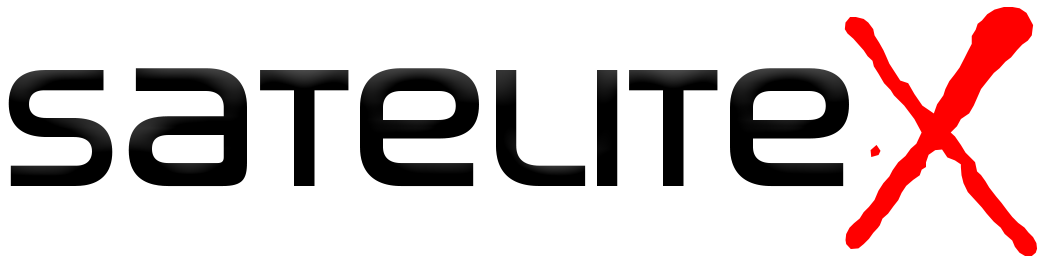
<style>
.page{position:relative;width:1047px;height:261px;background:#ffffff}
.page>*{position:absolute;margin:0}
.t1{font:674.5px "Chiller-Regular";letter-spacing:-0.04em;color:#ff0000}
.t2{font:172.2px "NasalizationRg-Regular";letter-spacing:-0.04em;color:#000000}
.t3{font:222.4px "NasalizationRg-Regular";letter-spacing:-0.04em;color:#000000}
</style>
<div class="page">
<p class="t1" style="left:844px;top:7px;width:194px;height:249px">x</p>
<p class="t2" style="left:8px;top:68px;width:841px;height:119px">S<span class="t3">a</span>T<span class="t3">e</span>LIT<span class="t3">e</span></p>
</div>
